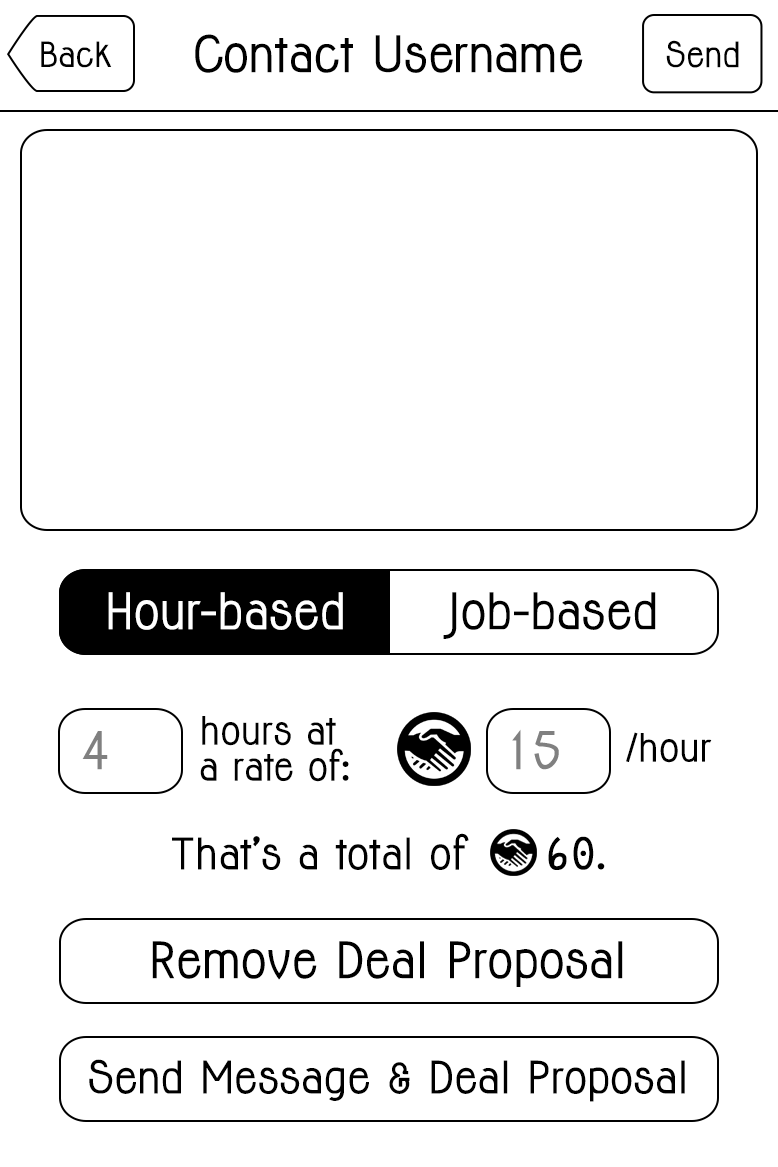
<style>
.page{position:relative;width:778px;height:1167px;background:#ffffff}
.page>*{position:absolute;margin:0}
.t1{font:32px "Jolly-Bold";color:#000000}
.t2{font:46.2px "Jolly-Bold";color:#000000}
.t3{font:32.1px "Jolly-Bold";color:#000000}
.t4{font:46.2px "Jolly-Bold";color:#ffffff}
.t5{font:36px/36px "Jolly-Bold";color:#000000}
.t6{font:48px "Jolly-Bold";color:#808080}
.t7{font:36px "Jolly-Bold";color:#000000}
.t8{font:40px "Jolly-Bold";color:#000000}
.t9{font:40px "Jolly-Bold";color:#000000;font-weight:bold}
.t10{font:41.3px "Jolly-Bold";color:#000000}
</style>
<div class="page">
<p class="t1" style="left:41px;top:41px;width:71px;height:27px">Back</p>
<p class="t2" style="left:195px;top:34px;width:388px;height:39px">Contact Username</p>
<p class="t3" style="left:666px;top:40px;width:73px;height:28px">Send</p>
<p class="t4" style="left:108px;top:592px;width:235px;height:38px">Hour-based</p>
<p class="t2" style="left:443px;top:592px;width:213px;height:47px">Job-based</p>
<p class="t5" style="left:200px;top:716px;width:149px;height:66px">hours at<br>a rate of:</p>
<p class="t6" style="left:82px;top:731px;width:26px;height:39px">4</p>
<p class="t6" style="left:512px;top:729px;width:47px;height:41px">15</p>
<p class="t7" style="left:626px;top:732px;width:86px;height:31px">/hour</p>
<p class="t8" style="left:172px;top:833px;width:433px;height:37px">That’s a total of     <span class="t9">60</span>.</p>
<p class="t2" style="left:152px;top:941px;width:471px;height:46px">Remove Deal Proposal</p>
<p class="t10" style="left:89px;top:1059px;width:596px;height:43px">Send Message &amp; Deal Proposal</p>
</div>
